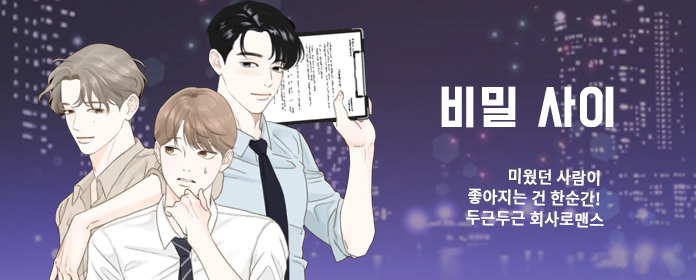
<style>
.page{position:relative;width:696px;height:280px}
.page>*{position:absolute;margin:0}
.t1{font:42px "BMDoHyeon";letter-spacing:0.05em;color:#ffffff;font-weight:bold;scale:0.95 1}
.t2{font:16.8px/21px "NotoSansKR-Medium";letter-spacing:-0.01em;color:#ffffff;font-weight:bold;scale:0.95 1}
</style>
<div class="page">
<p class="t1" style="left:441px;top:86px;width:173px;height:42px">비밀 사이</p>
<p class="t2" style="left:466px;top:168px;width:138px;height:60px;text-align:right;rotate:1deg">미웠던 사람이 <br>좋아지는 건 한순간! <br>두근두근 회사로맨스</p>
</div>
